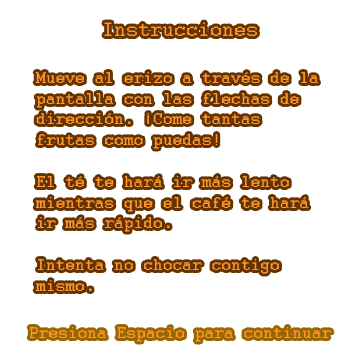
<style>
.page{position:relative;width:360px;height:360px;background:#ffffff}
.page>*{position:absolute;margin:0}
.t1{font:17.3px "Courier";color:#ff9933}
.t2{font:21.3px "Courier";color:#ff9933}
</style>
<div class="page">
<p class="t1" style="left:35px;top:22px;width:283px;height:269px;text-align:center"><span class="t2">Instrucciones<br><br></span>Mueve al erizo a través de la pantalla con las flechas de dirección. ¡Come tantas frutas como puedas!<br><br>El té te hará ir más lento mientras que el café te hará ir más rápido.<br><br>Intenta no chocar contigo mismo.</p>
</div>
